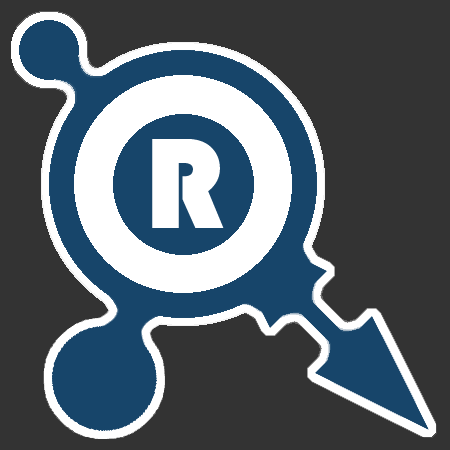
<style>
.page{position:relative;width:450px;height:450px;background:#333333}
.page>*{position:absolute;margin:0}
.t1{font:133.2px "Bauhaus93";color:#ffffff}
</style>
<div class="page">
<p class="t1" style="left:152px;top:139px;width:72px;height:89px">R</p>
</div>
